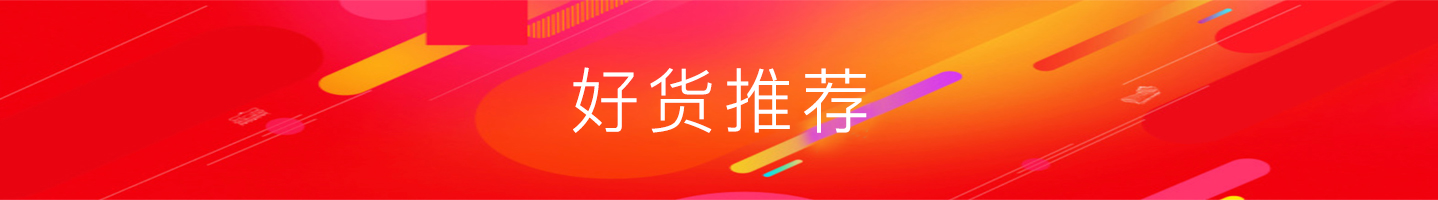
<style>
.page{position:relative;width:1438px;height:200px}
.page>*{position:absolute;margin:0}
.t1{font:70px "PingFang-SC-Regular";letter-spacing:0.1em;color:#ffffff}
</style>
<div class="page">
<p class="t1" style="left:573px;top:67px;width:294px;height:66px">好货推荐</p>
</div>
